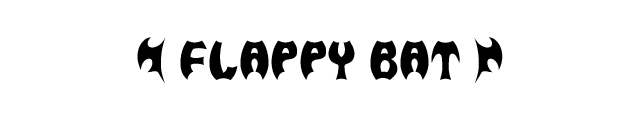
<style>
.page{position:relative;width:640px;height:120px;background:#ffffff}
.page>*{position:absolute;margin:0}
.t1{font:48px "BAT-MEN__G";color:#000000}
</style>
<div class="page">
<p class="t1" style="left:137px;top:37px;width:366px;height:47px">( FLAPPY BAT )</p>
</div>
